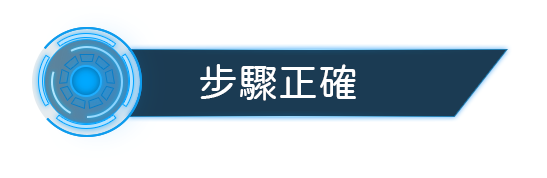
<style>
.page{position:relative;width:547px;height:178px;background:#ffffff}
.page>*{position:absolute;margin:0}
.t1{font:40px "jf-openhuninn-1.1";color:#ffffff}
</style>
<div class="page">
<p class="t1" style="left:200px;top:64px;width:156px;height:37px">步驟正確</p>
</div>
